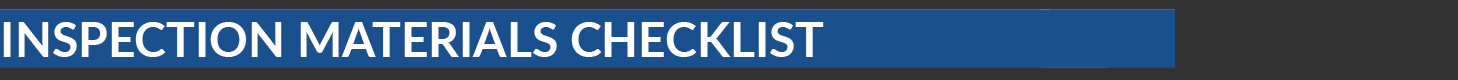
<style>
.page{position:relative;width:1458px;height:80px;background:#1a508d}
.page>*{position:absolute;margin:0}
.t1{font:48px "Lato-Bold";color:#ffffff}
</style>
<div class="page">
<p class="t1" style="left:3px;top:22px;width:821px;height:35px">INSPECTION MATERIALS CHECKLIST</p>
</div>
